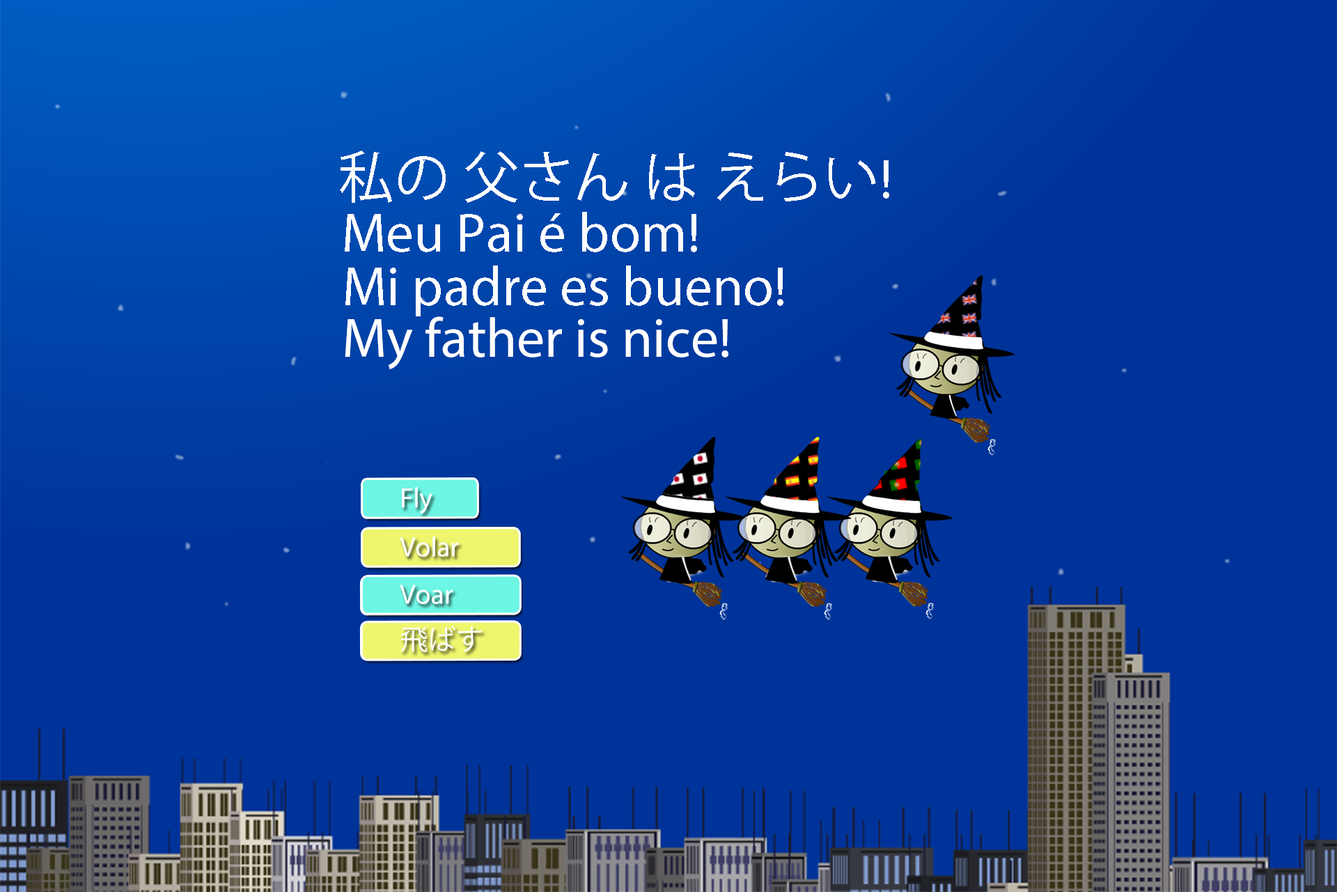
<style>
.page{position:relative;width:1337px;height:892px;background:#003399}
.page>*{position:absolute;margin:0}
.t1{font:55.8px "KozGoPr6N-Regular";color:#ffffff}
.t2{font:55.8px "MyriadPro-Regular";color:#ffffff}
.t3{font:55.7px "MyriadPro-Regular";color:#ffffff}
.t4{font:28.3px "MyriadPro-Regular";color:#ffffff}
.t5{font:27.9px "MyriadPro-Regular";color:#ffffff}
.t6{font:27.6px "MyriadPro-Regular";color:#ffffff}
.t7{font:27.6px "KozGoPr6N-Regular";color:#ffffff}
</style>
<div class="page">
<p class="t1" style="left:340px;top:150px;width:550px;height:53px">私の 父さん は えらい<span class="t2">!</span></p>
<p class="t2" style="left:345px;top:212px;width:352px;height:40px">Meu Pai é bom!</p>
<p class="t3" style="left:345px;top:265px;width:439px;height:51px">Mi padre es bueno!</p>
<p class="t3" style="left:345px;top:316px;width:384px;height:53px">My father is nice!</p>
<p class="t4" style="left:402px;top:487px;width:31px;height:27px">Fly</p>
<p class="t4" style="left:402px;top:487px;width:31px;height:27px">Fly</p>
<p class="t5" style="left:400px;top:536px;width:59px;height:21px">Volar</p>
<p class="t5" style="left:400px;top:536px;width:59px;height:21px">Volar</p>
<p class="t6" style="left:399px;top:585px;width:54px;height:20px">Voar</p>
<p class="t6" style="left:400px;top:584px;width:53px;height:20px">Voar</p>
<p class="t7" style="left:400px;top:626px;width:81px;height:26px">飛ばす</p>
<p class="t7" style="left:401px;top:626px;width:81px;height:26px">飛ばす</p>
</div>
